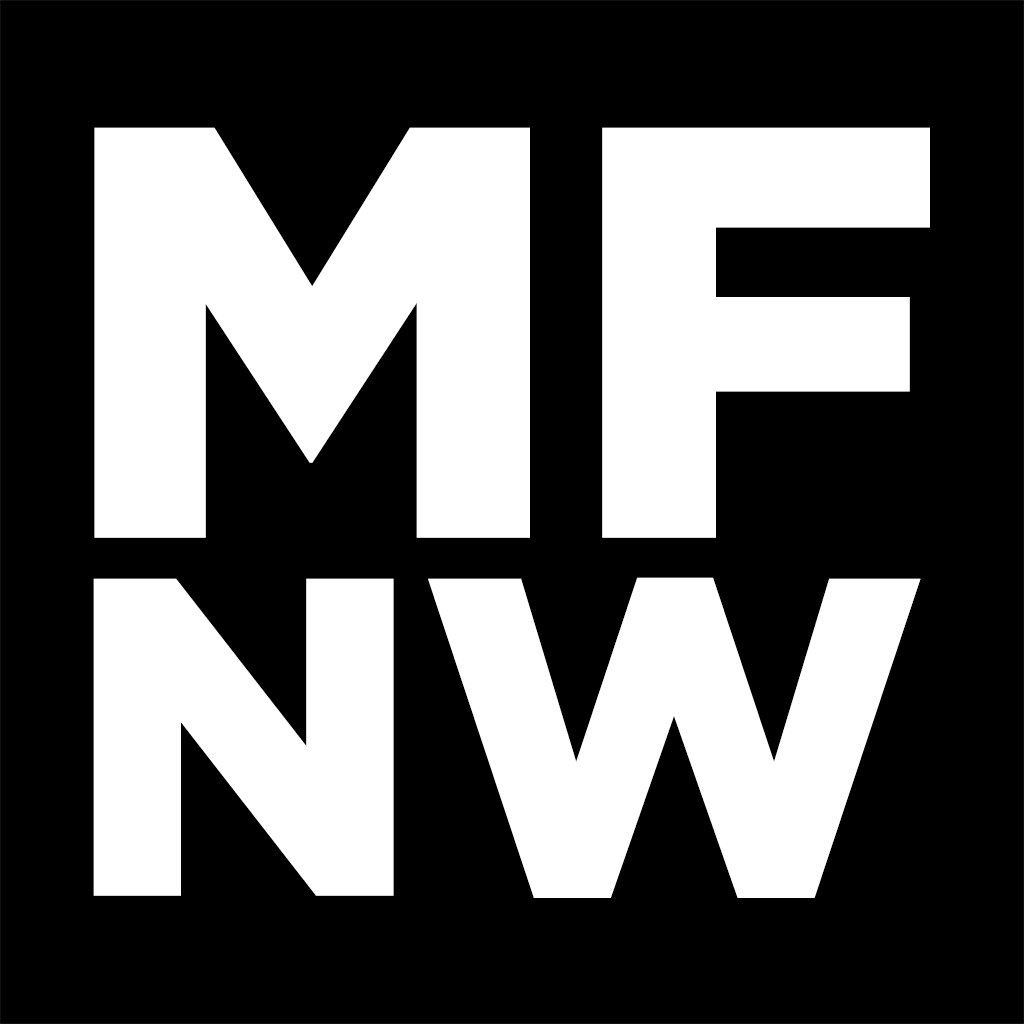
<style>
.page{position:relative;width:1024px;height:1024px;background:#000000}
.page>*{position:absolute;margin:0}
.t1{font:585px "Gotham-Black";color:#ffffff}
.t2{font:452.7px "Gotham-Black";color:#ffffff}
</style>
<div class="page">
<p class="t1" style="left:94px;top:127px;width:836px;height:411px">MF</p>
<p class="t2" style="left:93px;top:577px;width:828px;height:321px">NW</p>
</div>
